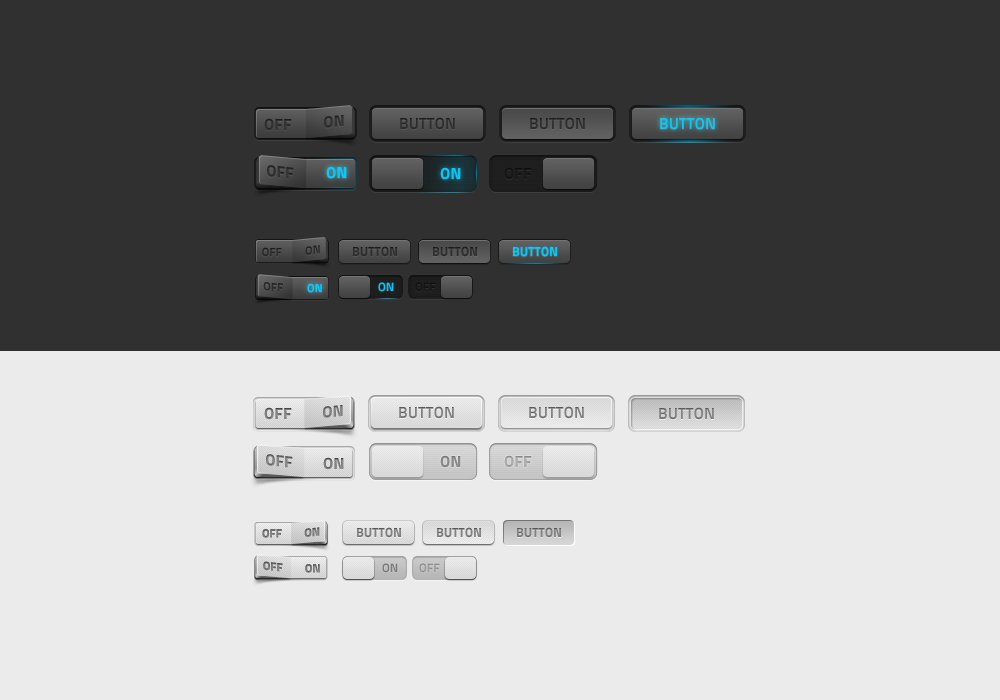
<style>
.page{position:relative;width:1000px;height:700px;background:#ebebeb}
.page>*{position:absolute;margin:0}
.t1{font:16px "TitilliumMaps29L-999wt";color:#313131}
.t2{font:16px "TitilliumMaps29L-800wt";color:#313131}
.t3{font:16px "TitilliumMaps29L-800wt";color:#00ccff}
.t4{font:16px "TitilliumMaps29L-999wt";color:#00ccff}
.t5{font:16px "TitilliumMaps29L-999wt";color:#00cafc}
.t6{font:16px "TitilliumMaps29L-999wt";color:#171717}
.t7{font:11.7px "TitilliumMaps29L-999wt";color:#313131}
.t8{font:13px "TitilliumMaps29L-999wt";color:#313131}
.t9{font:13px "TitilliumMaps29L-999wt";color:#00ccff}
.t10{font:11.7px "TitilliumMaps29L-999wt";color:#00ccff}
.t11{font:12px "TitilliumMaps29L-800wt";color:#00ccff}
.t12{font:12px "TitilliumMaps29L-800wt";color:#121212}
.t13{font:16px "TitilliumMaps29L-999wt";color:#7c7c7c}
.t14{font:16px "TitilliumMaps29L-999wt";color:#818181}
.t15{font:16px "TitilliumMaps29L-800wt";color:#838383}
.t16{font:16px "TitilliumMaps29L-999wt";color:#7e7e7e}
.t17{font:16px "TitilliumMaps29L-999wt";color:#7d7d7d}
.t18{font:16px "TitilliumMaps29L-999wt";color:#888888}
.t19{font:16px "TitilliumMaps29L-999wt";color:#aaaaaa}
.t20{font:11.6px "TitilliumMaps29L-999wt";color:#797979}
.t21{font:11.6px "TitilliumMaps29L-999wt";color:#7b7b7b}
.t22{font:13px "TitilliumMaps29L-999wt";color:#838383}
.t23{font:11.6px "TitilliumMaps29L-999wt";color:#7c7c7c}
.t24{font:12px "TitilliumMaps29L-800wt";color:#7c7c7c}
.t25{font:12px "TitilliumMaps29L-800wt";color:#959595}
</style>
<div class="page">
<p class="t1" style="left:264px;top:118px;width:28px;height:13px">OFF</p>
<p class="t1" style="left:324px;top:115px;width:20px;height:13px;rotate:-6deg">ON</p>
<p class="t2" style="left:400px;top:117px;width:55px;height:13px">BUTTON</p>
<p class="t2" style="left:530px;top:117px;width:55px;height:13px">BUTTON</p>
<p class="t3" style="left:660px;top:117px;width:55px;height:13px">BUTTON</p>
<p class="t1" style="left:267px;top:165px;width:27px;height:14px;rotate:6deg">OFF</p>
<p class="t4" style="left:326px;top:166px;width:21px;height:13px">ON</p>
<p class="t5" style="left:440px;top:167px;width:21px;height:13px">ON</p>
<p class="t6" style="left:504px;top:167px;width:28px;height:13px">OFF</p>
<p class="t7" style="left:305px;top:245px;width:15px;height:10px;rotate:-6deg">ON</p>
<p class="t8" style="left:353px;top:246px;width:44px;height:11px">BUTTON</p>
<p class="t8" style="left:433px;top:246px;width:44px;height:11px">BUTTON</p>
<p class="t9" style="left:513px;top:246px;width:44px;height:11px">BUTTON</p>
<p class="t7" style="left:262px;top:247px;width:20px;height:10px">OFF</p>
<p class="t7" style="left:263px;top:282px;width:20px;height:10px;rotate:6deg">OFF</p>
<p class="t10" style="left:307px;top:283px;width:15px;height:10px">ON</p>
<p class="t11" style="left:378px;top:282px;width:16px;height:10px">ON</p>
<p class="t12" style="left:415px;top:282px;width:21px;height:10px">OFF</p>
<p class="t13" style="left:264px;top:407px;width:28px;height:13px">OFF</p>
<p class="t14" style="left:323px;top:405px;width:20px;height:13px;rotate:-6deg">ON</p>
<p class="t15" style="left:399px;top:406px;width:55px;height:13px">BUTTON</p>
<p class="t15" style="left:529px;top:406px;width:55px;height:13px">BUTTON</p>
<p class="t15" style="left:659px;top:407px;width:55px;height:13px">BUTTON</p>
<p class="t16" style="left:266px;top:454px;width:27px;height:14px;rotate:6deg">OFF</p>
<p class="t17" style="left:323px;top:457px;width:21px;height:13px">ON</p>
<p class="t18" style="left:440px;top:455px;width:21px;height:13px">ON</p>
<p class="t19" style="left:504px;top:455px;width:28px;height:13px">OFF</p>
<p class="t20" style="left:262px;top:529px;width:20px;height:9px">OFF</p>
<p class="t21" style="left:304px;top:527px;width:16px;height:10px;rotate:-6deg">ON</p>
<p class="t22" style="left:357px;top:527px;width:44px;height:11px">BUTTON</p>
<p class="t22" style="left:437px;top:527px;width:44px;height:11px">BUTTON</p>
<p class="t22" style="left:517px;top:527px;width:44px;height:11px">BUTTON</p>
<p class="t23" style="left:263px;top:561px;width:20px;height:11px;rotate:6deg">OFF</p>
<p class="t23" style="left:305px;top:564px;width:15px;height:9px">ON</p>
<p class="t24" style="left:382px;top:563px;width:16px;height:10px">ON</p>
<p class="t25" style="left:419px;top:563px;width:21px;height:10px">OFF</p>
</div>
